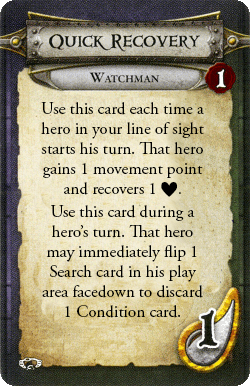
<style>
.page{position:relative;width:250px;height:386px}
.page>*{position:absolute;margin:0}
.t1{font:17px/20px "AGaramondPro-Regular";color:#000000}
.t2{font:15px/20px "DescentSymbols";color:#000000}
.t3{font:15px/20px "AGaramondPro-Regular";color:#000000}
</style>
<div class="page">
<p class="t1" style="left:41px;top:102px;width:163px;height:216px;text-align:center">Use this card each time a hero in your line of sight starts his turn. That hero gains 1 movement point and recovers 1 <span class="t2">h</span><span class="t3">.<br></span>Use this card during a hero’s turn. That hero may immediately flip 1 Search card in his play area facedown to discard 1 Condition card.</p>
</div>
